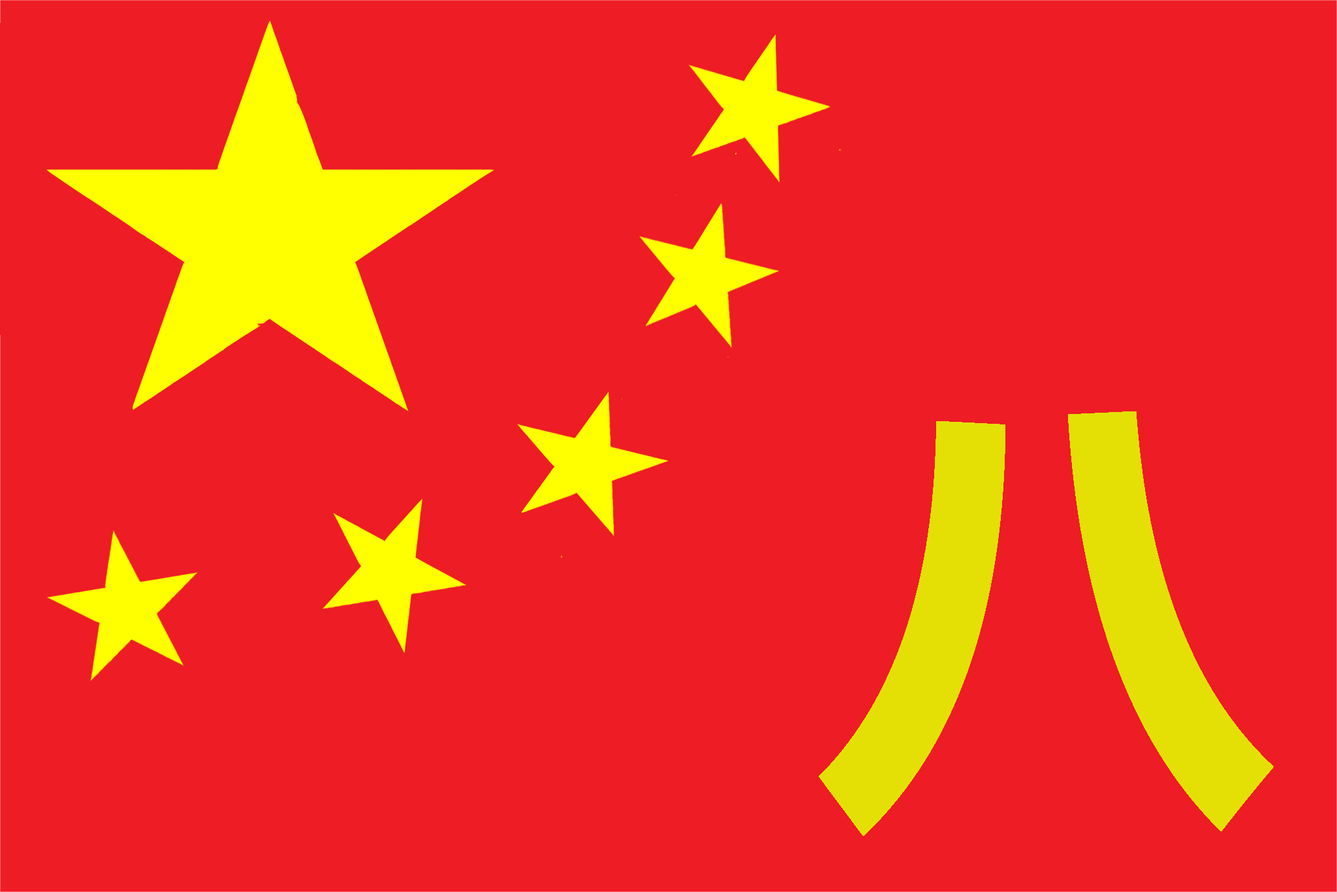
<style>
.page{position:relative;width:1337px;height:892px;background:#ee1c25}
.page>*{position:absolute;margin:0}
.t1{font:457px "MicrosoftYaHei-Bold";color:#e4e005}
</style>
<div class="page">
<p class="t1" style="left:819px;top:411px;width:455px;height:425px">八</p>
</div>
